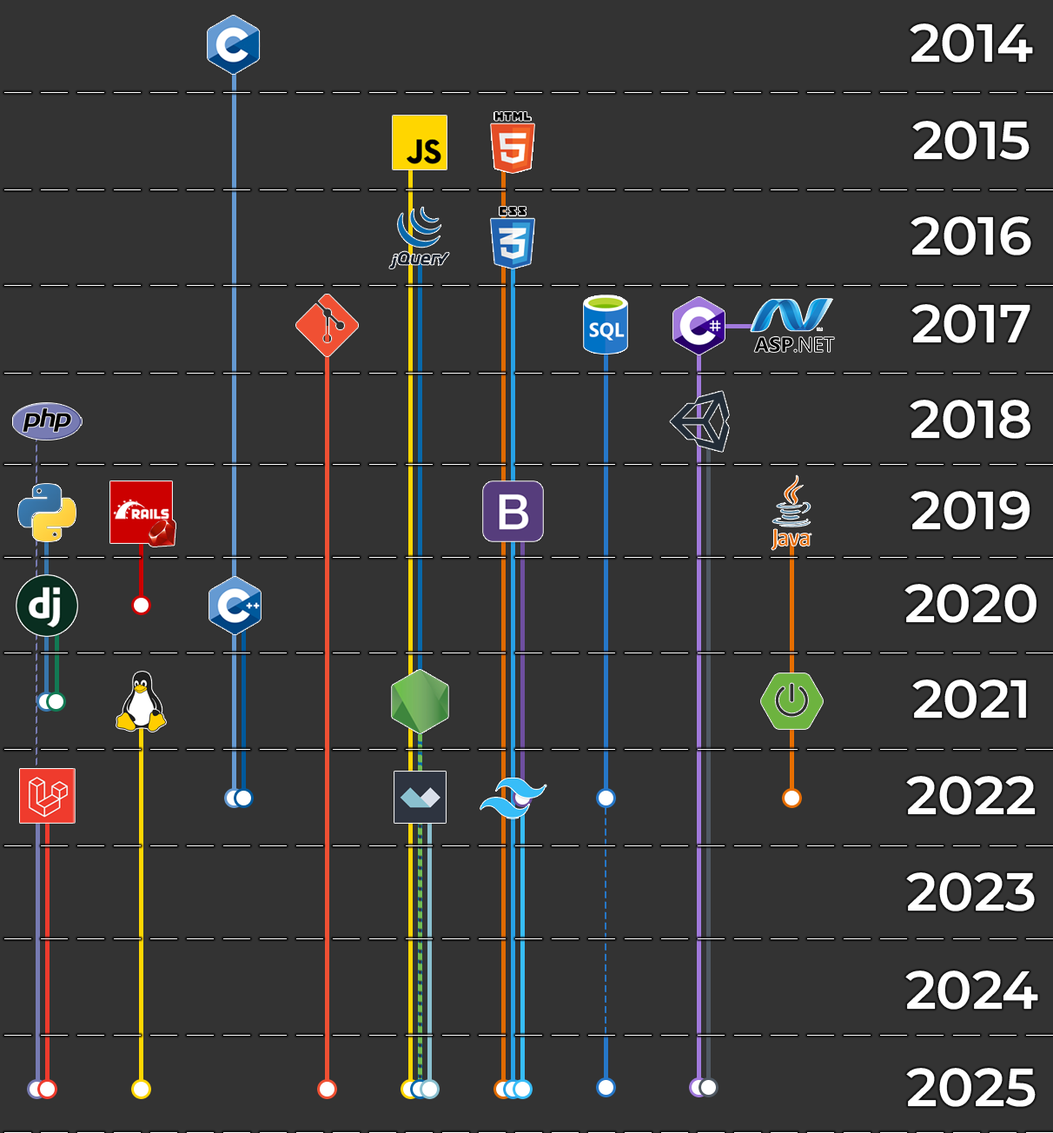
<style>
.page{position:relative;width:1053px;height:1133px;background:#333333}
.page>*{position:absolute;margin:0}
.t1{font:53.4px "Montserrat-SemiBold";color:#ffffff}
</style>
<div class="page">
<p class="t1" style="left:909px;top:23px;width:124px;height:40px">2014</p>
<p class="t1" style="left:912px;top:121px;width:117px;height:39px">2015</p>
<p class="t1" style="left:910px;top:216px;width:121px;height:39px">2016</p>
<p class="t1" style="left:911px;top:304px;width:119px;height:39px">2017</p>
<p class="t1" style="left:909px;top:400px;width:121px;height:39px">2018</p>
<p class="t1" style="left:910px;top:491px;width:120px;height:39px">2019</p>
<p class="t1" style="left:904px;top:584px;width:132px;height:39px">2020</p>
<p class="t1" style="left:912px;top:679px;width:114px;height:39px">2021</p>
<p class="t1" style="left:906px;top:776px;width:129px;height:39px">2022</p>
<p class="t1" style="left:906px;top:872px;width:129px;height:39px">2023</p>
<p class="t1" style="left:905px;top:970px;width:133px;height:39px">2024</p>
<p class="t1" style="left:906px;top:1068px;width:129px;height:39px">2025</p>
</div>
